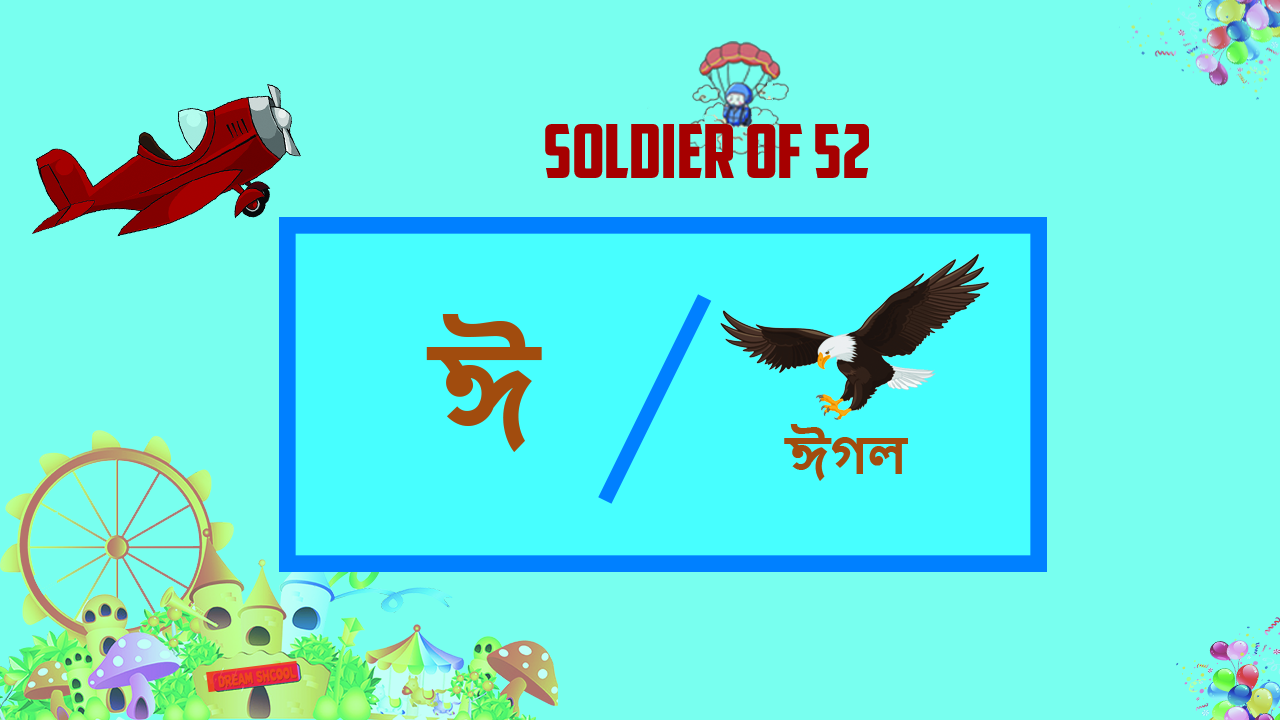
<style>
.page{position:relative;width:1280px;height:720px;background:#78ffef}
.page>*{position:absolute;margin:0}
.t1{font:74.5px "AmericanCaptain";color:#a60000}
.t2{font:122.1px "NirmalaUI-Bold";color:#a24b0d}
.t3{font:49.7px "NirmalaUI-Bold";color:#a24b0d}
</style>
<div class="page">
<p class="t1" style="left:545px;top:124px;width:324px;height:54px">SOLDIER OF 52</p>
<p class="t2" style="left:426px;top:314px;width:116px;height:138px">ঈ</p>
<p class="t3" style="left:784px;top:424px;width:124px;height:57px">ঈগল</p>
</div>
